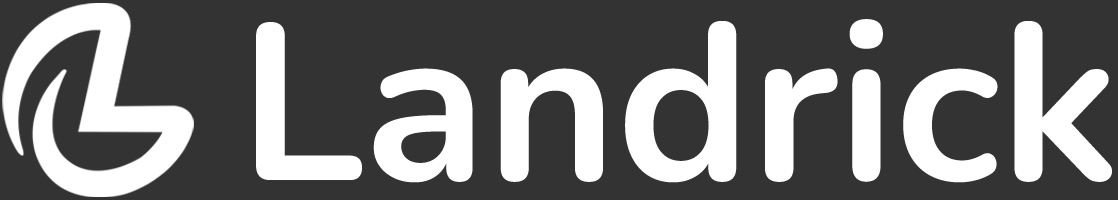
<style>
.page{position:relative;width:1118px;height:200px;background:#333333}
.page>*{position:absolute;margin:0}
.t1{font:223px "Nunito-Bold";color:#ffffff}
</style>
<div class="page">
<p class="t1" style="left:256px;top:19px;width:856px;height:164px">Landrick</p>
</div>
